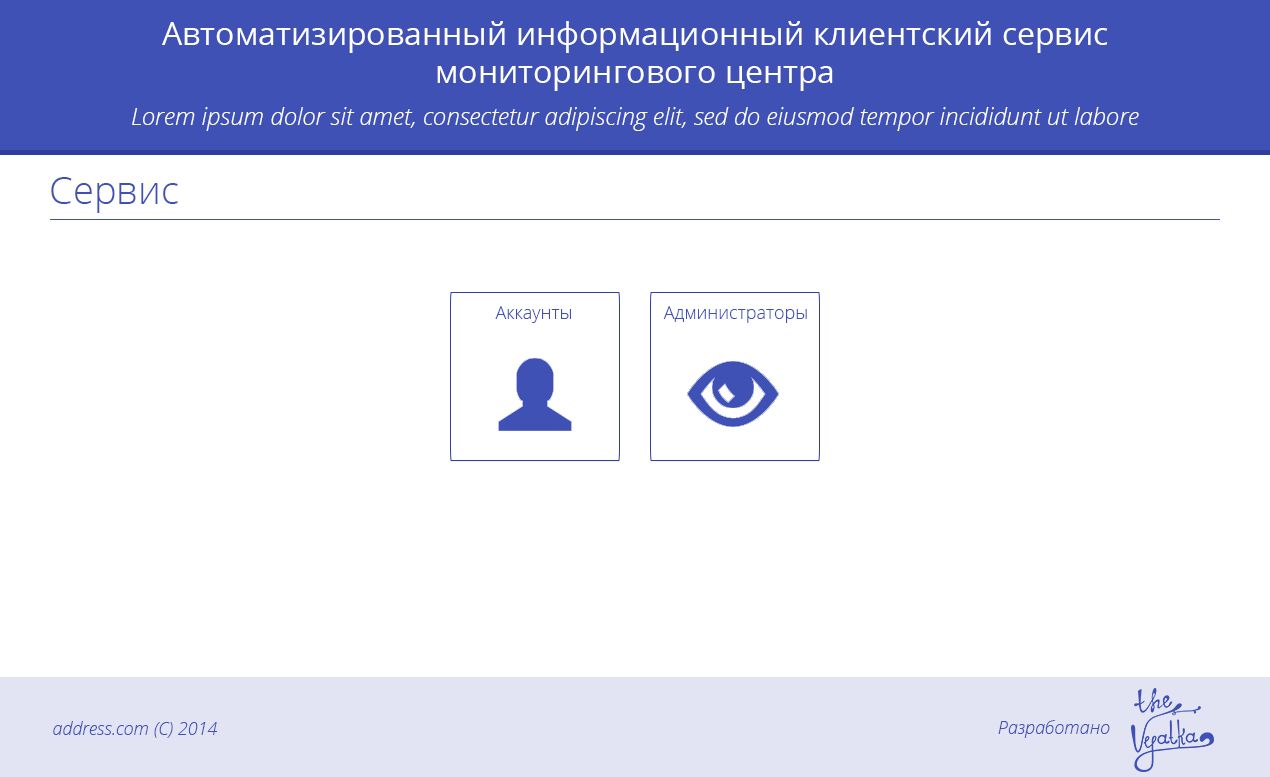
<style>
.page{position:relative;width:1270px;height:777px;background:#ffffff}
.page>*{position:absolute;margin:0}
.t1{font:32px "OpenSans";color:#ffffff}
.t2{font:24px "OpenSansLight-Italic";color:#ffffff}
.t3{font:38px "OpenSans-Light";color:#3f51b5}
.t4{font:18px "OpenSans-Light";color:#3f51b5}
.t5{font:18px "OpenSansLight-Italic";color:#3f51b5}
</style>
<div class="page">
<p class="t1" style="left:162px;top:21px;width:946px;height:70px;text-align:center">Автоматизированный информационный клиентский сервис<br>мониторингового центра</p>
<p class="t2" style="left:132px;top:107px;width:1007px;height:24px">Lorem ipsum dolor sit amet, consectetur adipiscing elit, sed do eiusmod tempor incididunt ut labore</p>
<p class="t3" style="left:51px;top:177px;width:127px;height:36px">Сервис</p>
<p class="t4" style="left:495px;top:306px;width:76px;height:17px">Аккаунты</p>
<p class="t4" style="left:663px;top:306px;width:144px;height:17px">Администраторы</p>
<p class="t5" style="left:53px;top:721px;width:165px;height:17px">address.com (C) 2014</p>
<p class="t5" style="left:998px;top:720px;width:112px;height:18px">Разработано</p>
</div>
